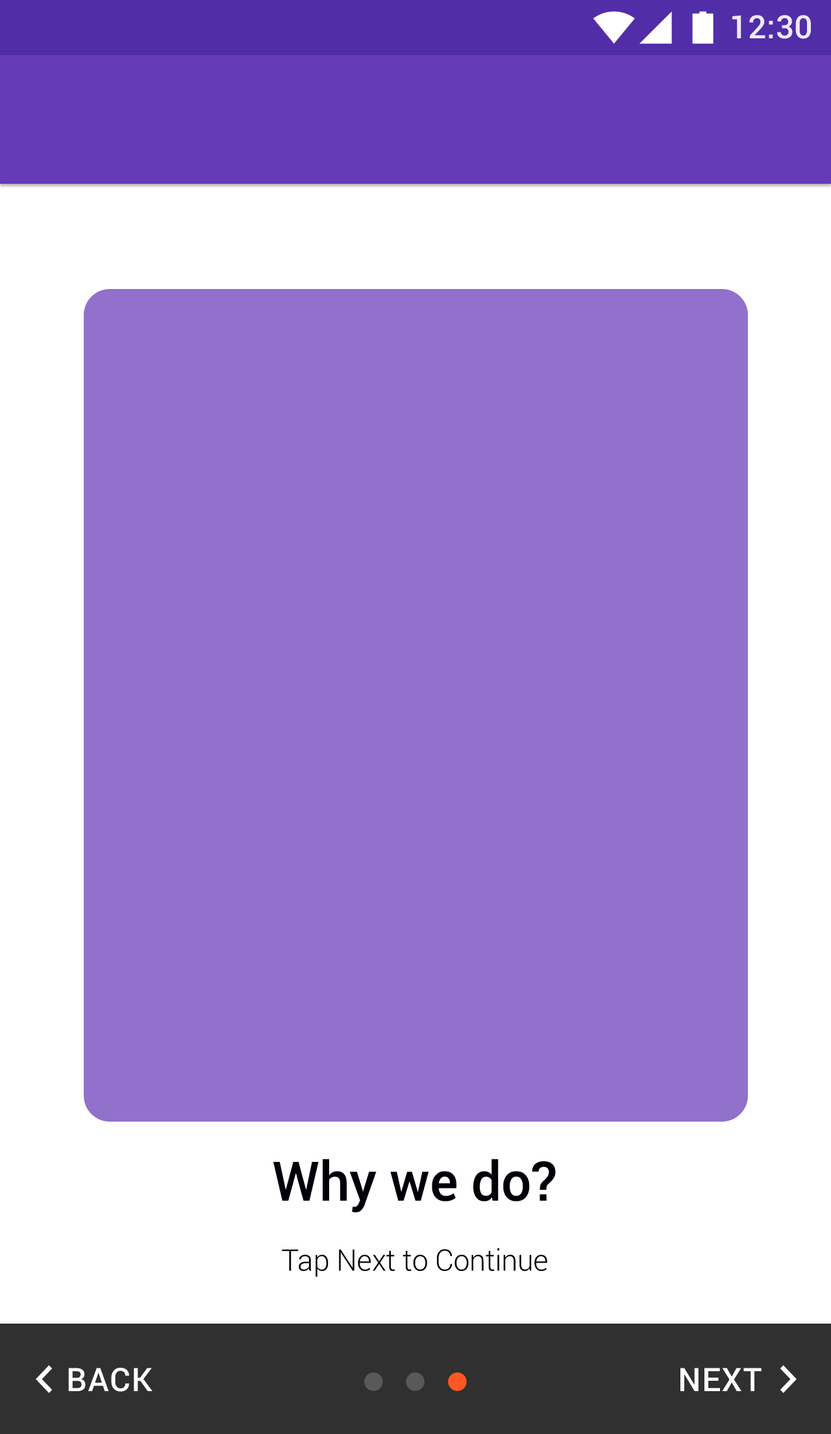
<style>
.page{position:relative;width:831px;height:1434px;background:#9171cb}
.page>*{position:absolute;margin:0}
.t1{font:32.2px "Roboto-Medium";color:#eeeaf6}
.t2{font:54.4px "Roboto-Medium";color:#04000a}
.t3{font:29.7px "Roboto-Light";color:#04000a}
.t4{font:32.4px "Roboto-Medium";letter-spacing:0.03em;color:#ffffff}
</style>
<div class="page">
<p class="t1" style="left:733px;top:15px;width:78px;height:24px">12:30</p>
<p class="t2" style="left:273px;top:1159px;width:283px;height:54px">Why we do?</p>
<p class="t3" style="left:282px;top:1248px;width:266px;height:29px">Tap Next to Continue</p>
<p class="t4" style="left:68px;top:1368px;width:85px;height:24px">BACK</p>
<p class="t4" style="left:681px;top:1368px;width:81px;height:23px">NEXT</p>
</div>
